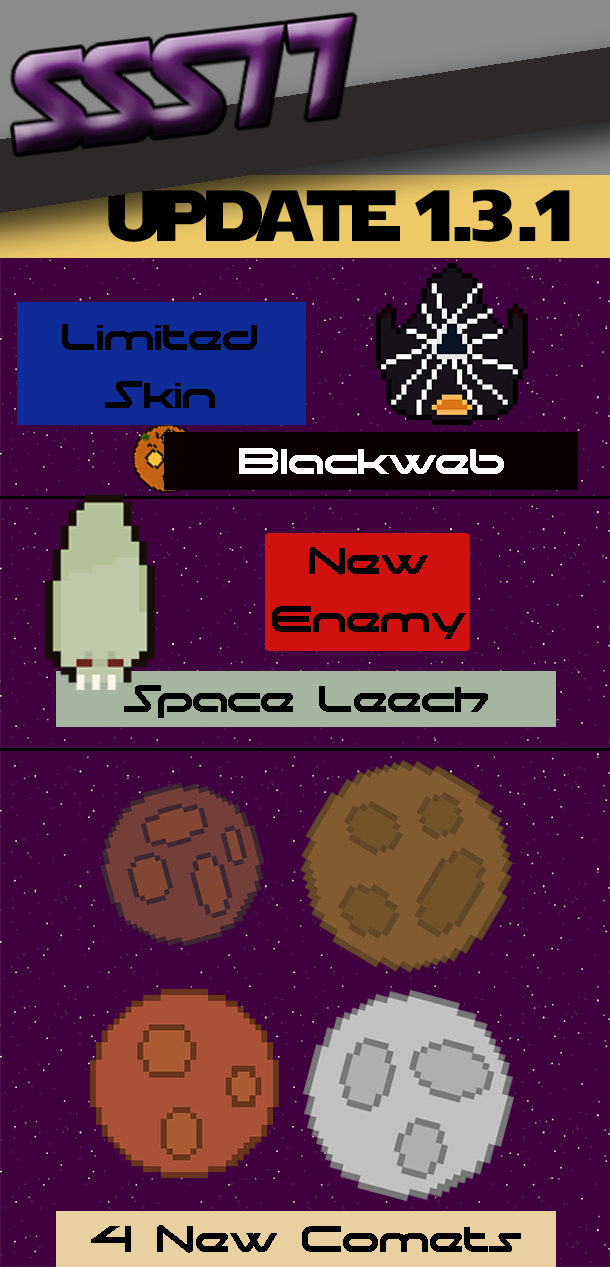
<style>
.page{position:relative;width:610px;height:1267px;background:#400040}
.page>*{position:absolute;margin:0}
.t1{font:72px "StarJedi";color:#000000}
.t2{font:48px "moonhouse";color:#000000}
.t3{font:48px "moonhouse";color:#ffffff}
</style>
<div class="page">
<p class="t1" style="left:108px;top:189px;width:462px;height:53px">update 1.3.1</p>
<p class="t2" style="left:62px;top:324px;width:195px;height:84px;text-align:center">Limited<br>Skin</p>
<p class="t3" style="left:239px;top:448px;width:265px;height:26px">Blackweb</p>
<p class="t2" style="left:272px;top:547px;width:194px;height:92px;text-align:center">New<br>Enemy</p>
<p class="t2" style="left:124px;top:685px;width:364px;height:33px">Space Leech</p>
<p class="t2" style="left:91px;top:1225px;width:430px;height:28px">4 New Comets</p>
</div>
